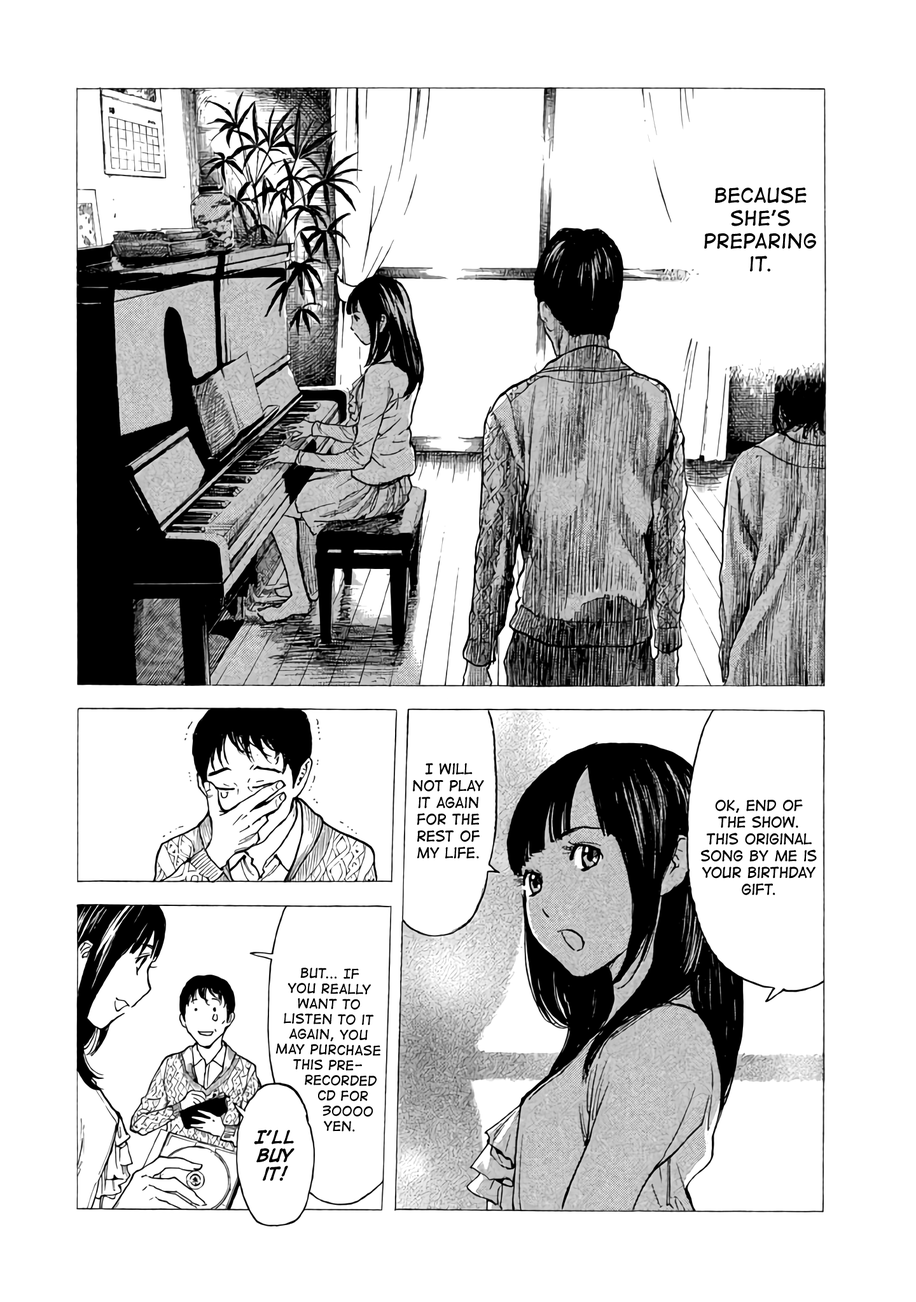
<style>
.page{position:relative;width:916px;height:1302px;background:#ffffff}
.page>*{position:absolute;margin:0}
.t1{font:19.1px "DigitalStrip";color:#000000}
.t2{font:14px "DigitalStrip";color:#000000}
.t3{font:12.7px "DigitalStrip";color:#000000}
.t4{font:15.3px "DigitalStripBold";color:#000000}
</style>
<div class="page">
<p class="t1" style="left:704px;top:187px;width:112px;height:85px;text-align:center">Because she’s preparing it.</p>
<p class="t2" style="left:413px;top:763px;width:71px;height:96px;text-align:center">I will not play it again for the rest of my life.</p>
<p class="t2" style="left:701px;top:799px;width:115px;height:96px;text-align:center">Ok, end of the show. This original song by me is your birthday gift.</p>
<p class="t3" style="left:275px;top:968px;width:106px;height:164px;text-align:center;rotate:1deg">BuT... If <br>you really want to listen to it again, you may purchase <br>this pre-<br>     recorded      <br>      CD for    <br>        30000 <br>     yen.</p>
<p class="t4" style="left:254px;top:1130px;width:40px;height:51px;text-align:center">I’ll buy it!</p>
</div>
